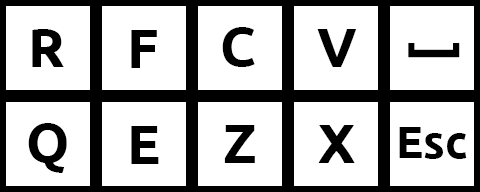
<style>
.page{position:relative;width:480px;height:192px;background:#ffffff}
.page>*{position:absolute;margin:0}
.t1{font:55.3px "Ubuntu-Bold";color:#000000}
.t2{font:52.6px "Ubuntu-Bold";color:#000000}
.t3{font:45px "Ubuntu-Bold";color:#000000}
</style>
<div class="page">
<p class="t1" style="left:32px;top:29px;width:32px;height:38px">R</p>
<p class="t1" style="left:131px;top:30px;width:26px;height:38px">F</p>
<p class="t1" style="left:222px;top:27px;width:33px;height:40px">C</p>
<p class="t1" style="left:317px;top:29px;width:40px;height:38px">V</p>
<p class="t2" style="left:408px;top:43px;width:52px;height:15px;rotate:-90deg">[</p>
<p class="t1" style="left:28px;top:123px;width:39px;height:50px">Q</p>
<p class="t1" style="left:131px;top:126px;width:28px;height:38px">E</p>
<p class="t1" style="left:224px;top:125px;width:31px;height:38px">Z</p>
<p class="t1" style="left:318px;top:125px;width:37px;height:38px">X</p>
<p class="t3" style="left:399px;top:127px;width:68px;height:32px">Esc</p>
</div>
